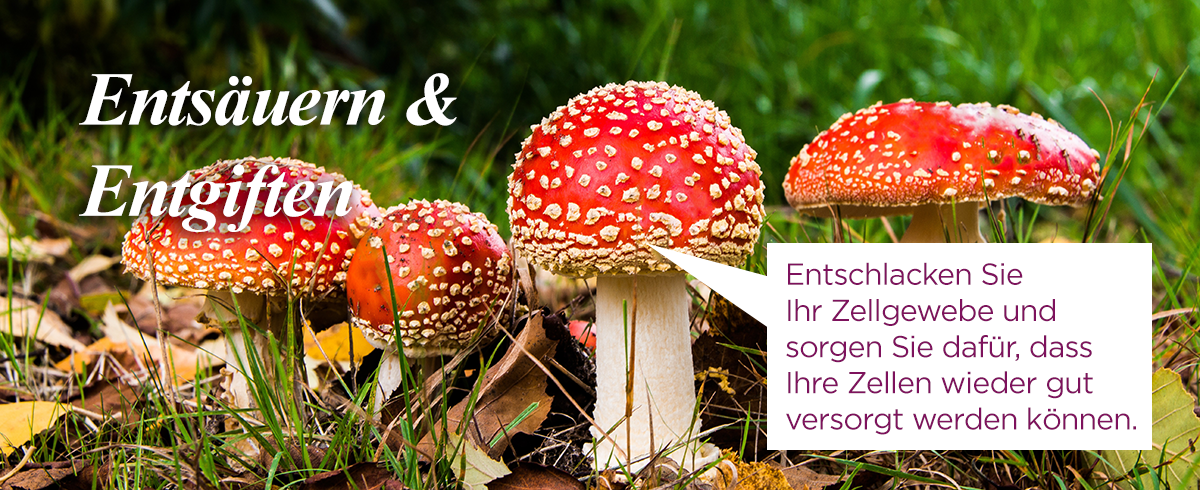
<style>
.page{position:relative;width:1200px;height:490px}
.page>*{position:absolute;margin:0}
.t1{font:76px "TimesNewRomanPS-BoldItalicMT";letter-spacing:-0.025em;color:#ffffff}
.t2{font:30.2px "Gotham-Book";letter-spacing:-0.025em;color:#7e125d}
</style>
<div class="page">
<p class="t1" style="left:79px;top:73px;width:378px;height:159px">Entsäuern &amp;<br>Entgiften</p>
<p class="t2" style="left:786px;top:262px;width:350px;height:173px">Entschlacken Sie <br>Ihr Zellgewebe und <br>sorgen Sie dafür, dass <br>Ihre Zellen wieder gut <br>versorgt werden können.</p>
</div>
